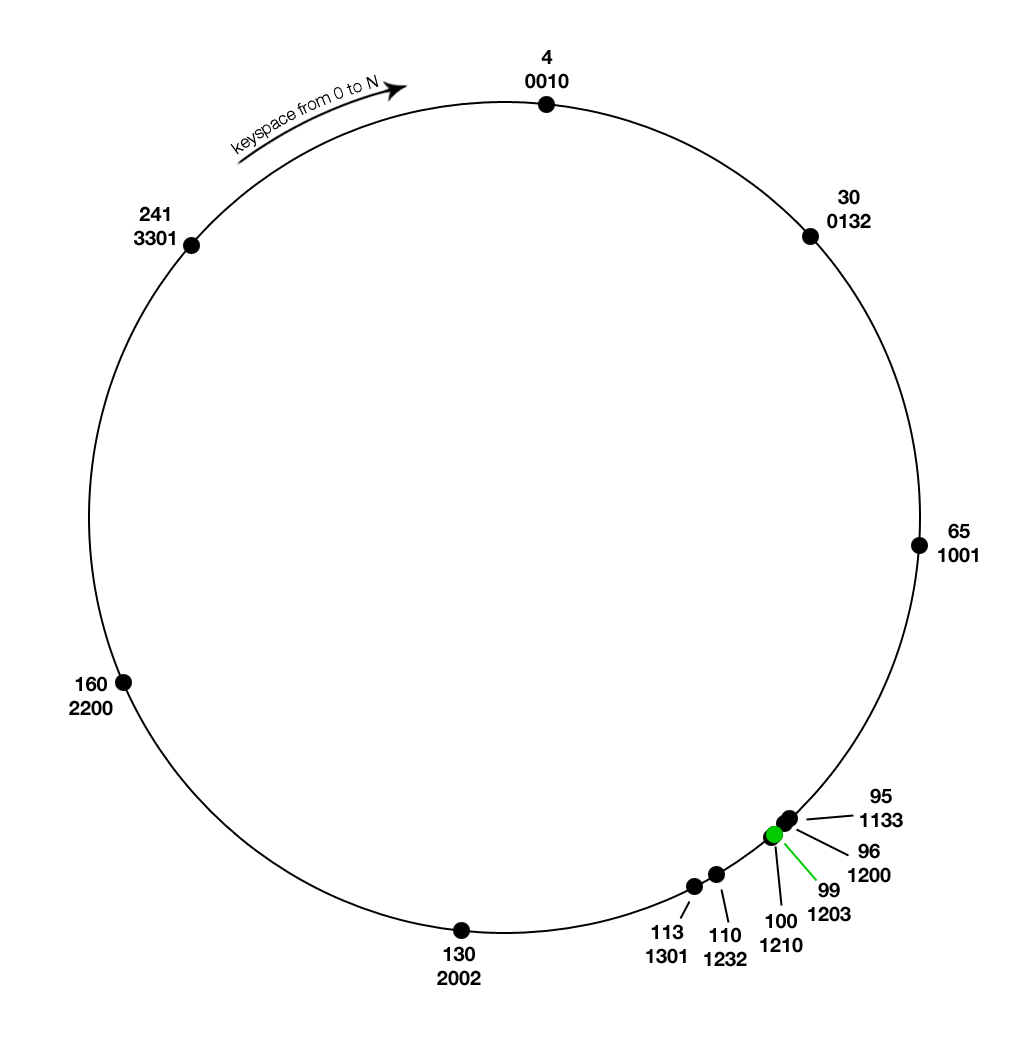
<style>
.page{position:relative;width:1011px;height:1045px;background:#ffffff}
.page>*{position:absolute;margin:0}
.t1{font:20px "HelveticaNeue-Bold";color:#000000}
.t2{font:17px "HelveticaNeue-Light";color:#000000}
</style>
<div class="page">
<p class="t1" style="left:525px;top:50px;width:44px;height:39px;text-align:center">4<br>0010</p>
<p class="t2" style="left:230px;top:74px;width:149px;height:81px;rotate:-26deg">keyspace from 0 to N</p>
<p class="t1" style="left:827px;top:189px;width:44px;height:40px;text-align:center">30<br>0132</p>
<p class="t1" style="left:134px;top:206px;width:41px;height:40px;text-align:center">241<br>3301</p>
<p class="t1" style="left:938px;top:523px;width:40px;height:40px;text-align:center">65<br>1001</p>
<p class="t1" style="left:69px;top:676px;width:44px;height:40px;text-align:center">160<br>2200</p>
<p class="t1" style="left:860px;top:788px;width:43px;height:40px;text-align:center">95<br>1133</p>
<p class="t1" style="left:848px;top:843px;width:43px;height:40px;text-align:center">96<br>1200</p>
<p class="t1" style="left:808px;top:882px;width:43px;height:40px;text-align:center">99<br>1203</p>
<p class="t1" style="left:760px;top:913px;width:43px;height:40px;text-align:center">100<br>1210</p>
<p class="t1" style="left:646px;top:924px;width:40px;height:40px;text-align:center">113<br>1301</p>
<p class="t1" style="left:704px;top:927px;width:43px;height:40px;text-align:center">110<br>1232</p>
<p class="t1" style="left:437px;top:946px;width:44px;height:40px;text-align:center">130<br>2002</p>
</div>
